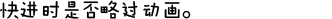
<style>
.page{position:relative;width:332px;height:19px;background:#ffffff}
.page>*{position:absolute;margin:0}
.t1{font:22px "¢è?";color:#000000}
</style>
<div class="page">
<p class="t1" style="left:0px;top:0px;width:191px;height:19px">快进时是否略过动画。</p>
</div>
